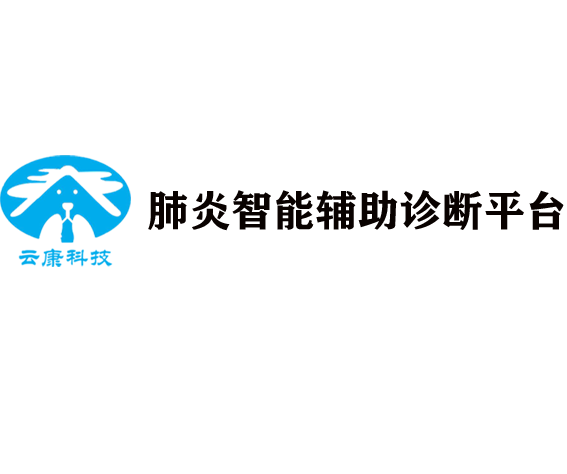
<style>
.page{position:relative;width:567px;height:474px;background:#ffffff}
.page>*{position:absolute;margin:0}
.t1{font:42px "FZCHSJW--GB1-0";color:#090200}
</style>
<div class="page">
<p class="t1" style="left:148px;top:190px;width:416px;height:41px">肺炎智能辅助诊断平台</p>
</div>
